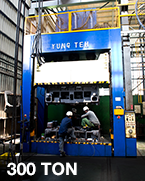
<style>
.page{position:relative;width:145px;height:181px}
.page>*{position:absolute;margin:0}
.t1{font:17.3px "HelveticaNeue-Bold";color:#ffffff}
</style>
<div class="page">
<p class="t1" style="left:7px;top:162px;width:70px;height:14px">600 TON</p>
<p class="t1" style="left:7px;top:162px;width:70px;height:14px">300 TON</p>
</div>
